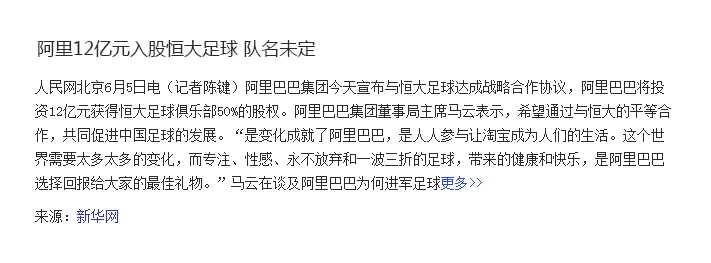
<style>
.page{position:relative;width:711px;height:263px;background:#ffffff}
.page>*{position:absolute;margin:0}
.t1{font:18px "MicrosoftYaHei";color:#2a2a2a}
.t2{font:14px/24px "SimSun";color:#2a2a2a}
.t3{font:14px/24px "SimSun";color:#2945ef}
.t4{font:14px "SimSun";color:#2a2a2a}
.t5{font:14px "SimSun";color:#292de2}
</style>
<div class="page">
<p class="t1" style="left:38px;top:40px;width:278px;height:17px">阿里12亿元入股恒大足球 队名未定</p>
<p class="t2" style="left:35px;top:80px;width:636px;height:110px">人民网北京6月5日电（记者陈键）阿里巴巴集团今天宣布与恒大足球达成战略合作协议，阿里巴巴将投资12亿元获得恒大足球俱乐部50%的股权。阿里巴巴集团董事局主席马云表示，希望通过与恒大的平等合作，共同促进中国足球的发展。“是变化成就了阿里巴巴，是人人参与让淘宝成为人们的生活。这个世界需要太多太多的变化，而专注、性感、永不放弃和一波三折的足球，带来的健康和快乐，是阿里巴巴选择回报给大家的最佳礼物。”马云在谈及阿里巴巴为何进军足球<span class="t3">更多&gt;&gt;</span></p>
<p class="t4" style="left:35px;top:209px;width:83px;height:14px">来源：<span class="t5">新华网</span></p>
</div>
